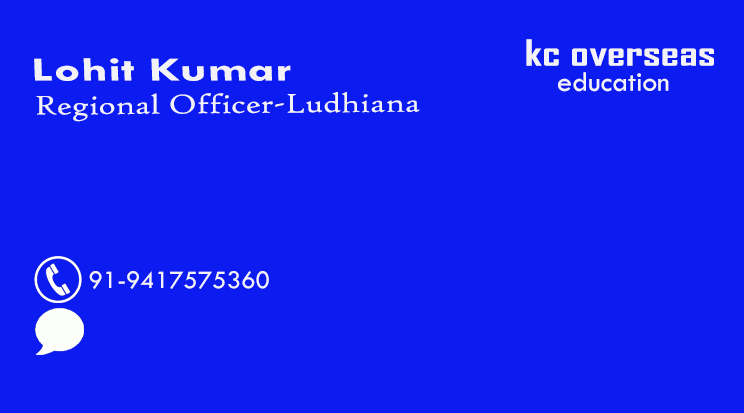
<style>
.page{position:relative;width:744px;height:413px;background:#0c1cf0}
.page>*{position:absolute;margin:0}
.t1{font:34.7px "AgencyFB-Bold";color:#f3f3f7;scale:1.34 1}
.t2{font:33.9px "TwCenMT-Bold";color:#f3f3f7;scale:1.52 1}
.t3{font:29.2px "TwCenMT-Regular";color:#f3f3f7}
.t4{font:29px "HighTowerText-Reg";color:#f3f3f7;scale:1.18 1}
.t5{font:26.1px "TwCenMT-Regular";color:#f3f3f7}
</style>
<div class="page">
<p class="t1" style="left:526px;top:39px;width:188px;height:27px">kc overseas</p>
<p class="t2" style="left:34px;top:58px;width:257px;height:23px">Lohit Kumar</p>
<p class="t3" style="left:558px;top:72px;width:111px;height:20px">education</p>
<p class="t4" style="left:36px;top:92px;width:384px;height:30px">Regional Officer-Ludhiana</p>
<p class="t5" style="left:89px;top:271px;width:180px;height:18px">91-9417575360</p>
</div>
